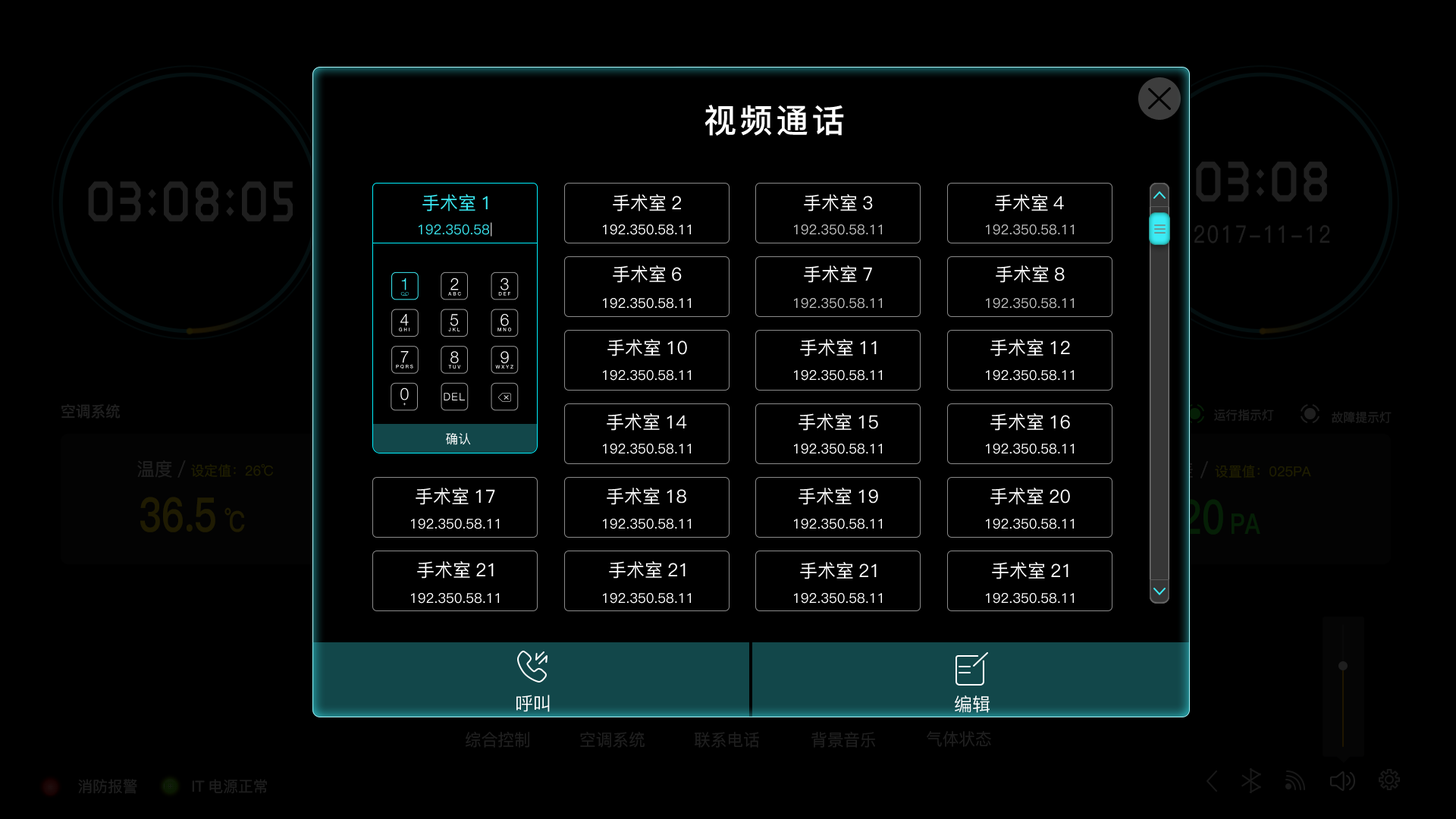
<style>
.page{position:relative;width:1456px;height:819px;background:#000000}
.page>*{position:absolute;margin:0}
.t1{font:32.8px "PingFang-SC-Bold";letter-spacing:0.1em;color:#ffffff}
.t2{font:18.2px "PingFang-SC-Medium";color:#3cecf6}
.t3{font:18.2px "PingFang-SC-Medium";color:#ffffff}
.t4{font:13.6px "PingFang-SC-Medium";color:#39e2ec}
.t5{font:13.6px "PingFang-SC-Medium";color:#ffffff}
.t6{font:13.6px "PingFang-SC-Medium";color:#bfbfbf}
.t7{font:10.5px "PingFang-SC-Medium";letter-spacing:0.1em;color:#ffffff}
.t8{font:12.8px "PingFang-SC-Medium";color:#ffffff}
</style>
<div class="page">
<p class="t1" style="left:704px;top:105px;width:140px;height:31px">视频通话</p>
<p class="t2" style="left:422px;top:194px;width:66px;height:18px">手术室1</p>
<p class="t3" style="left:613px;top:194px;width:68px;height:18px">手术室2</p>
<p class="t3" style="left:804px;top:194px;width:69px;height:18px">手术室3</p>
<p class="t3" style="left:995px;top:194px;width:69px;height:18px">手术室4</p>
<p class="t4" style="left:419px;top:222px;width:73px;height:15px">192.350.58<span class="t5">|</span></p>
<p class="t5" style="left:603px;top:224px;width:88px;height:11px">192.350.58.11</p>
<p class="t6" style="left:794px;top:224px;width:88px;height:11px">192.350.58.11</p>
<p class="t6" style="left:986px;top:224px;width:88px;height:11px">192.350.58.11</p>
<p class="t3" style="left:613px;top:265px;width:69px;height:18px">手术室6</p>
<p class="t3" style="left:804px;top:265px;width:68px;height:18px">手术室7</p>
<p class="t3" style="left:996px;top:265px;width:69px;height:18px">手术室8</p>
<p class="t5" style="left:603px;top:298px;width:88px;height:11px">192.350.58.11</p>
<p class="t6" style="left:794px;top:298px;width:88px;height:11px">192.350.58.11</p>
<p class="t6" style="left:986px;top:298px;width:88px;height:11px">192.350.58.11</p>
<p class="t3" style="left:607px;top:339px;width:80px;height:17px">手术室10</p>
<p class="t3" style="left:800px;top:339px;width:77px;height:17px">手术室11</p>
<p class="t3" style="left:990px;top:339px;width:80px;height:17px">手术室12</p>
<p class="t5" style="left:603px;top:370px;width:88px;height:11px">192.350.58.11</p>
<p class="t5" style="left:794px;top:370px;width:88px;height:11px">192.350.58.11</p>
<p class="t5" style="left:986px;top:370px;width:88px;height:11px">192.350.58.11</p>
<p class="t7" style="left:444px;top:393px;width:21px;height:7px">DEL</p>
<p class="t3" style="left:607px;top:413px;width:80px;height:18px">手术室14</p>
<p class="t3" style="left:799px;top:413px;width:79px;height:18px">手术室15</p>
<p class="t3" style="left:990px;top:413px;width:80px;height:18px">手术室16</p>
<p class="t8" style="left:446px;top:433px;width:25px;height:12px">确认</p>
<p class="t5" style="left:603px;top:444px;width:88px;height:10px">192.350.58.11</p>
<p class="t5" style="left:794px;top:444px;width:88px;height:10px">192.350.58.11</p>
<p class="t5" style="left:986px;top:444px;width:88px;height:10px">192.350.58.11</p>
<p class="t3" style="left:416px;top:488px;width:79px;height:17px">手术室17</p>
<p class="t3" style="left:607px;top:488px;width:79px;height:17px">手术室18</p>
<p class="t3" style="left:799px;top:488px;width:79px;height:17px">手术室19</p>
<p class="t3" style="left:990px;top:488px;width:80px;height:17px">手术室20</p>
<p class="t5" style="left:411px;top:519px;width:88px;height:10px">192.350.58.11</p>
<p class="t5" style="left:603px;top:519px;width:88px;height:10px">192.350.58.11</p>
<p class="t5" style="left:794px;top:519px;width:88px;height:10px">192.350.58.11</p>
<p class="t5" style="left:986px;top:519px;width:88px;height:10px">192.350.58.11</p>
<p class="t3" style="left:417px;top:561px;width:77px;height:18px">手术室21</p>
<p class="t3" style="left:609px;top:561px;width:77px;height:18px">手术室21</p>
<p class="t3" style="left:800px;top:562px;width:77px;height:17px">手术室21</p>
<p class="t3" style="left:992px;top:562px;width:76px;height:17px">手术室21</p>
<p class="t5" style="left:411px;top:593px;width:88px;height:11px">192.350.58.11</p>
<p class="t5" style="left:603px;top:593px;width:88px;height:11px">192.350.58.11</p>
<p class="t5" style="left:794px;top:593px;width:88px;height:11px">192.350.58.11</p>
<p class="t5" style="left:986px;top:593px;width:88px;height:11px">192.350.58.11</p>
<p class="t3" style="left:516px;top:695px;width:34px;height:17px">呼叫</p>
<p class="t3" style="left:955px;top:695px;width:35px;height:18px">编辑</p>
</div>
